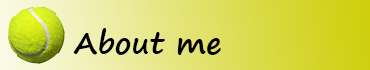
<style>
.page{position:relative;width:370px;height:70px}
.page>*{position:absolute;margin:0}
.t1{font:30px "SegoePrint-Bold";color:#000000}
</style>
<div class="page">
<p class="t1" style="left:73px;top:28px;width:148px;height:27px">About me</p>
</div>
